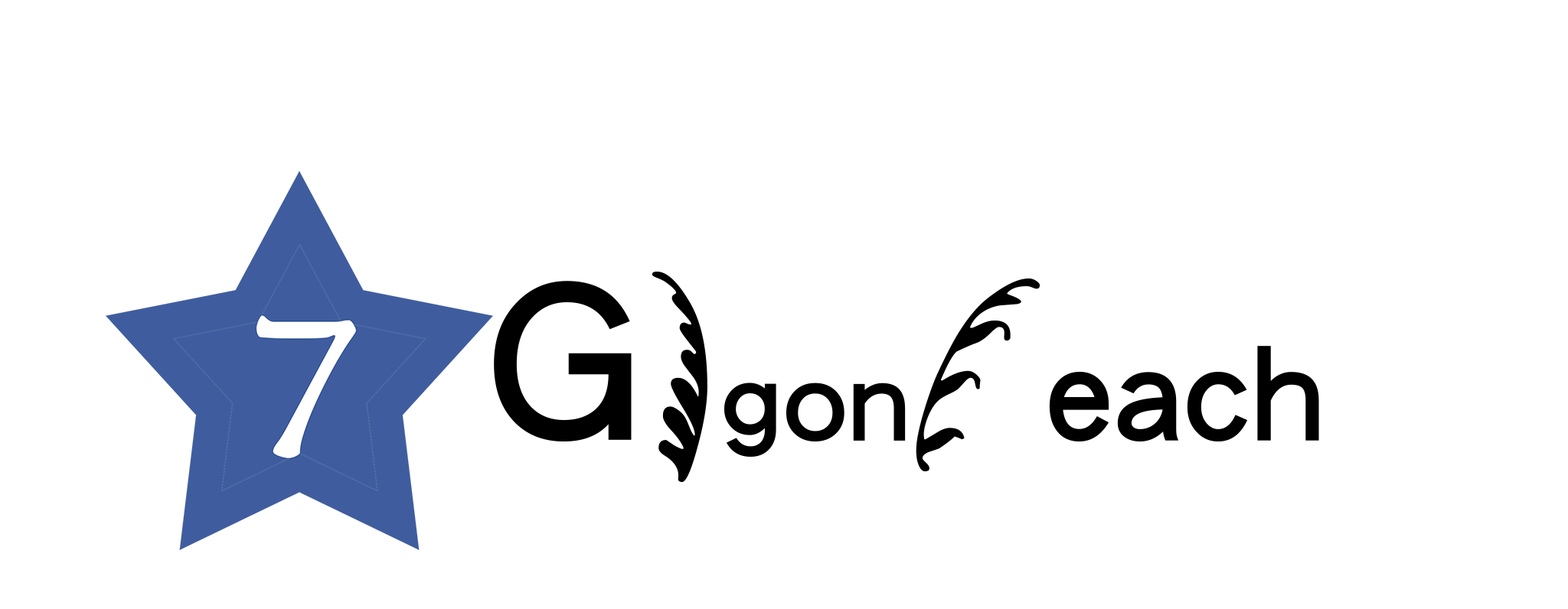
<style>
.page{position:relative;width:1568px;height:609px;background:#ffffff}
.page>*{position:absolute;margin:0}
.t1{font:129.5px "LiHeiPro";color:#000000}
.t2{font:214.1px "LiHeiPro";color:#000000}
.t3{font:214.1px "BodoniOrnamentsITCTT";color:#000000}
.t4{font:109.1px "LiHeiPro";color:#000000}
</style>
<div class="page">
<p class="t1" style="left:494px;top:272px;width:825px;height:210px"><span class="t2">G</span><span class="t3">M</span><span class="t4">gon</span><span class="t3">T</span>each</p>
</div>
